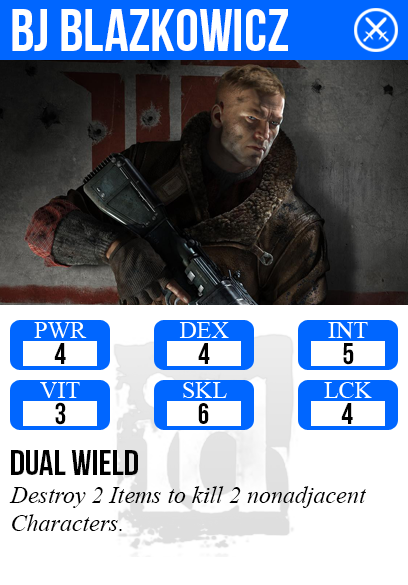
<style>
.page{position:relative;width:408px;height:585px;background:#ffffff}
.page>*{position:absolute;margin:0}
.t1{font:60px "BebasNeue";color:#ffffff}
.t2{font:29.9px "BebasNeue";color:#000000}
.t3{font:36px "BebasNeue";color:#000000}
.t4{font:24px "TimesNewRomanPS-ItalicMT";color:#000000}
</style>
<div class="page">
<p class="t1" style="left:12px;top:9px;width:276px;height:42px">BJ blazkowicz</p>
<p class="t2" style="left:54px;top:343px;width:12px;height:21px">4</p>
<p class="t2" style="left:198px;top:343px;width:12px;height:21px">4</p>
<p class="t2" style="left:343px;top:343px;width:11px;height:22px">5</p>
<p class="t2" style="left:55px;top:402px;width:11px;height:23px">3</p>
<p class="t2" style="left:198px;top:403px;width:11px;height:21px">6</p>
<p class="t2" style="left:341px;top:403px;width:12px;height:21px">4</p>
<p class="t3" style="left:11px;top:450px;width:127px;height:25px">dual wield</p>
<p class="t4" style="left:9px;top:486px;width:357px;height:45px">Destroy 2 Items to kill 2 nonadjacent<br>Characters.</p>
</div>
